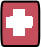
<style>
.page{position:relative;width:41px;height:47px;background:#c44e5c}
.page>*{position:absolute;margin:0}
.t1{font:36px "SpaceComics";color:#ffffff}
</style>
<div class="page">
<p class="t1" style="left:6px;top:9px;width:27px;height:27px">+</p>
</div>
